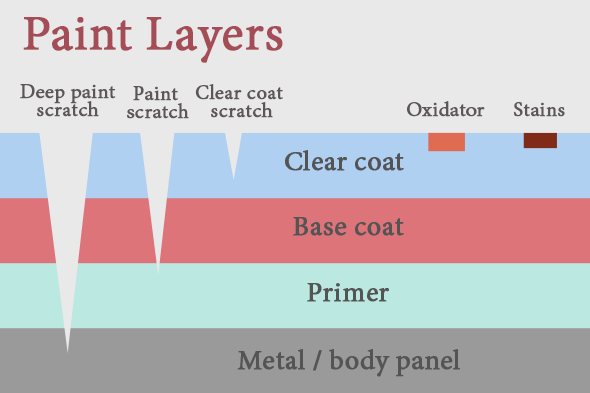
<style>
.page{position:relative;width:590px;height:393px;background:#e9e9e9}
.page>*{position:absolute;margin:0}
.t1{font:54px "AdobeGurmukhi-Regular";color:#a44d56;font-weight:bold}
.t2{font:22px/18px "AdobeGurmukhi-Regular";color:#5d5656;font-weight:bold}
.t3{font:22px "AdobeGurmukhi-Regular";color:#5d5656;font-weight:bold}
.t4{font:30px "AdobeGurmukhi-Regular";color:#545454;font-weight:bold}
</style>
<div class="page">
<p class="t1" style="left:23px;top:17px;width:260px;height:46px">Paint Layers</p>
<p class="t2" style="left:20px;top:84px;width:96px;height:33px;text-align:center">Deep paint<br>scratch</p>
<p class="t2" style="left:127px;top:86px;width:62px;height:33px;text-align:center">Paint <br>scratch</p>
<p class="t2" style="left:195px;top:84px;width:88px;height:34px;text-align:center">Clear coat <br>scratch</p>
<p class="t3" style="left:407px;top:101px;width:78px;height:16px">Oxidator</p>
<p class="t3" style="left:513px;top:102px;width:52px;height:15px">Stains</p>
<p class="t4" style="left:285px;top:150px;width:119px;height:21px">Clear coat</p>
<p class="t4" style="left:293px;top:217px;width:111px;height:19px">Base coat</p>
<p class="t4" style="left:307px;top:283px;width:82px;height:19px">Primer</p>
<p class="t4" style="left:237px;top:349px;width:223px;height:28px">Metal / body panel</p>
</div>
